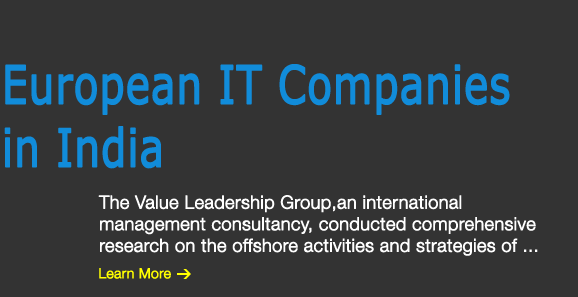
<style>
.page{position:relative;width:578px;height:297px;background:#333333}
.page>*{position:absolute;margin:0}
.t1{font:52.6px "Verdana";color:#118cda;font-weight:bold;scale:0.77 1}
.t2{font:18px "HelveticaNeueLTStd-Lt";color:#ffffff;font-weight:bold}
.t3{font:14px "HelveticaNeueLTPro-Lt";color:#ffff00;font-weight:bold}
</style>
<div class="page">
<p class="t1" style="left:4px;top:64px;width:506px;height:105px">European IT Companies<br>in India</p>
<p class="t2" style="left:98px;top:195px;width:440px;height:61px">The Value Leadership Group,an international <br>management consultancy, conducted comprehensive<br>research on the offshore activities and strategies of ...</p>
<p class="t3" style="left:99px;top:268px;width:72px;height:11px">Learn More</p>
</div>
